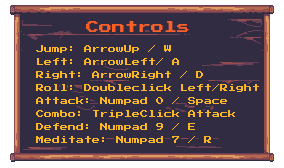
<style>
.page{position:relative;width:284px;height:168px;background:#322c43}
.page>*{position:absolute;margin:0}
.t1{font:13px "PressStart2P-Regular";color:#fa5f26}
.t2{font:8px/13px "PressStart2P-Regular";color:#fcb824}
</style>
<div class="page">
<p class="t1" style="left:86px;top:21px;width:103px;height:11px">Controls</p>
<p class="t2" style="left:36px;top:45px;width:223px;height:99px">Jump: ArrowUp / W<br>Left: ArrowLeft/ A<br>Right: ArrowRight / D<br>Roll: Doubleclick Left/Right<br>Attack: Numpad 0 / Space <br>Combo: TripleClick Attack<br>Defend: Numpad 9 / E <br>Meditate: Numpad 7 / R</p>
</div>
